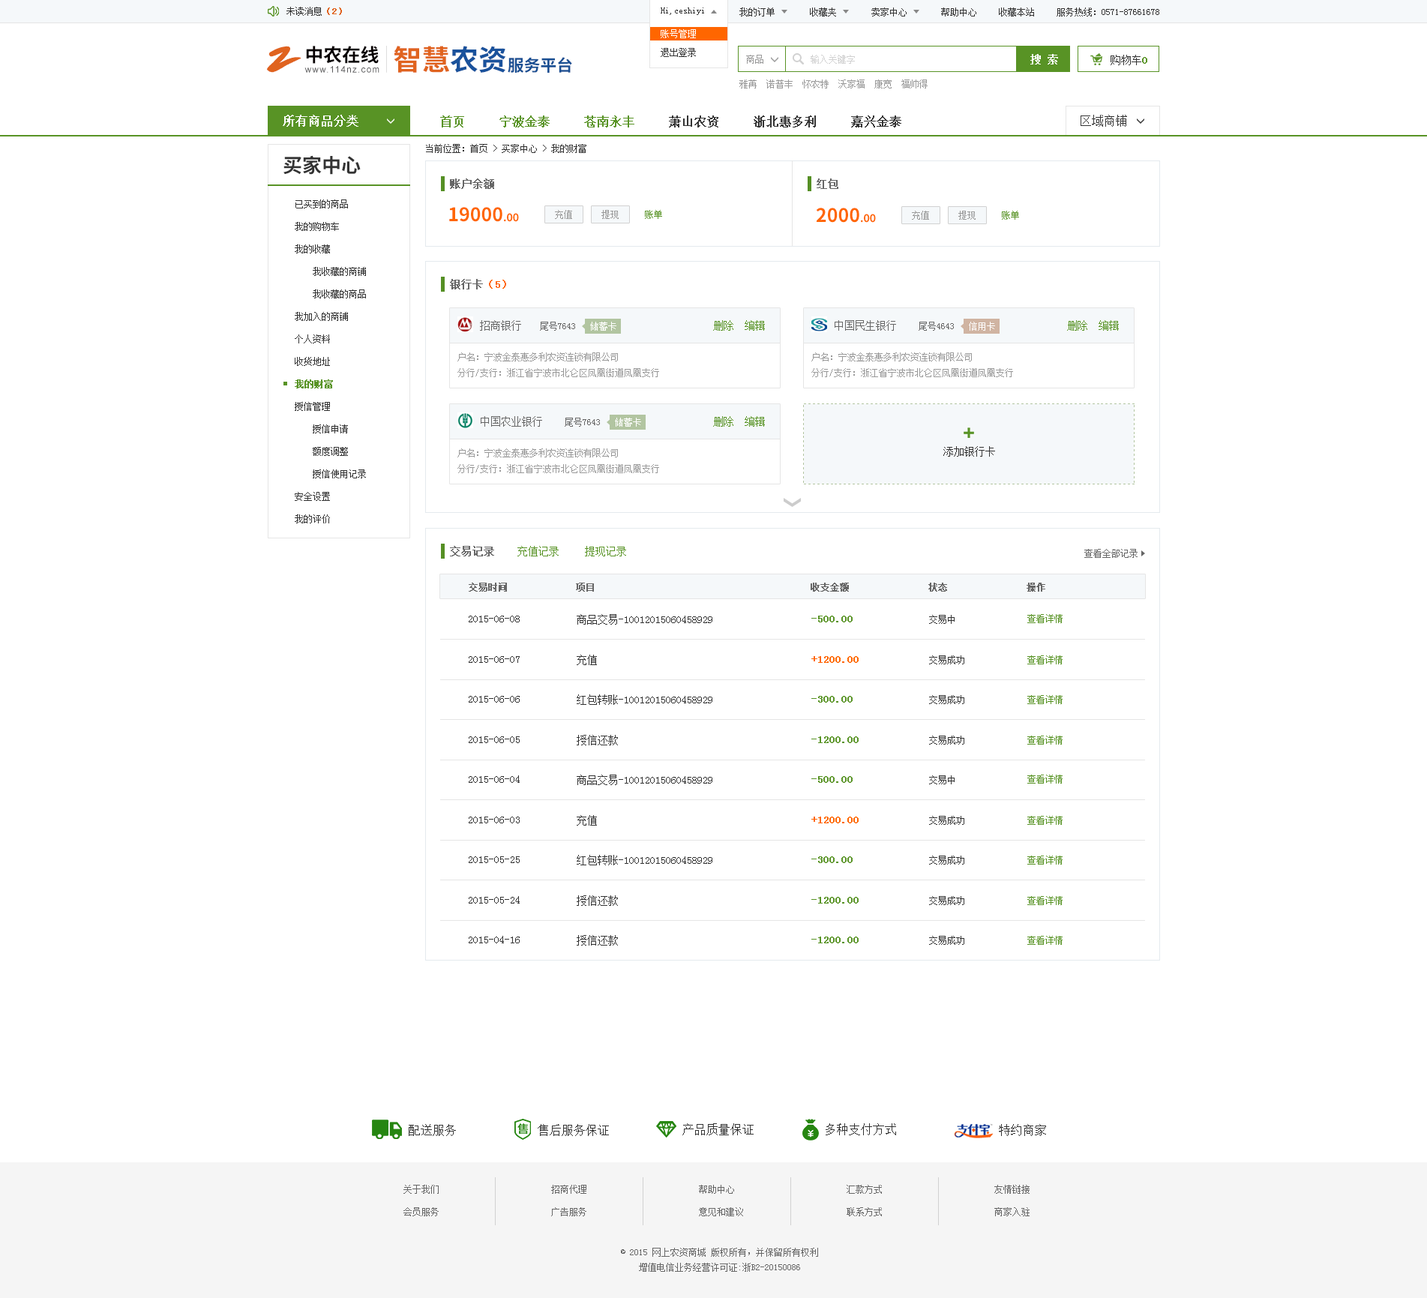
<style>
.page{position:relative;width:1427px;height:1298px;background:#ffffff}
.page>*{position:absolute;margin:0}
.t1{font:9px "SimSun";color:#333333}
.t2{font:9px "SimSun";color:#e0631f;font-weight:bold}
.t3{font:9px/18.8px "SimSun";color:#ffffff}
.t4{font:9px/18.8px "SimSun";color:#333333}
.t5{font:38px "SmudgerLetPlain";color:#e0631f}
.t6{font:18.6px "SourceHanSansCN-Bold";color:#060001}
.t7{font:28.4px "SourceHanSansCN-Bold";color:#e0631f}
.t8{font:28.4px "SourceHanSansCN-Bold";color:#1a529c}
.t9{font:10.5px "SimSun";color:#ffffff;font-weight:bold}
.t10{font:16.3px "SourceHanSansCN-Bold";color:#194f93}
.t11{font:9px "SimSun";color:#999999}
.t12{font:9px "SimSun";color:#d1d1d1}
.t13{font:10.5px "SimSun";color:#333333}
.t14{font:10.5px "SimSun";color:#589325;font-weight:bold}
.t15{font:8.9px "ArialMT";letter-spacing:0.1em;color:#585859}
.t16{font:12px "SimSun";color:#ffffff;font-weight:bold}
.t17{font:12px "SimSun";color:#333333;font-weight:bold}
.t18{font:12px "SimSun";color:#589325;font-weight:bold}
.t19{font:12px "SimSun";color:#333333}
.t20{font:19.5px "SourceHanSansCN-Bold";color:#333333}
.t21{font:10.5px "SimSun";color:#666666;font-weight:bold}
.t22{font:9px/22.5px "SimSun";color:#333333}
.t23{font:9px/22.5px "SimSun";color:#589325;font-weight:bold}
.t24{font:18.8px "SourceHanSansCN-Bold";color:#ff6600}
.t25{font:10.5px "SourceHanSansCN-Bold";color:#ff6600}
.t26{font:9px "SimSun";color:#589325}
.t27{font:10.5px "SimSun";color:#ff6600;font-weight:bold}
.t28{font:10.5px "SimSun";color:#666666}
.t29{font:9px "SimSun";color:#666666}
.t30{font:9px "SimSun";color:#ffffff}
.t31{font:10.5px "SimSun";color:#589325}
.t32{font:9px/7px "SourceHanSansCN-Regular";letter-spacing:0.12em;color:#b2c5a1}
.t33{font:9px "SourceHanSansCN-Regular";letter-spacing:0.12em;color:#b2c5a1}
.t34{font:9px "SimSun";color:#666666;font-weight:bold}
.t35{font:9px/22.5px "SimSun";color:#666666}
.t36{font:9px/15px "SimSun";color:#666666}
</style>
<div class="page">
<p class="t1" style="left:286px;top:7px;width:56px;height:9px">未读消息<span class="t2">（2）</span></p>
<p class="t1" style="left:661px;top:8px;width:43px;height:7px">Hi,ceshiyi</p>
<p class="t1" style="left:661px;top:8px;width:43px;height:7px">Hi,ceshiyi</p>
<p class="t1" style="left:740px;top:8px;width:35px;height:8px">我的订单</p>
<p class="t1" style="left:810px;top:8px;width:26px;height:8px">收藏夹</p>
<p class="t1" style="left:872px;top:8px;width:35px;height:8px">卖家中心</p>
<p class="t1" style="left:941px;top:8px;width:35px;height:8px">帮助中心</p>
<p class="t1" style="left:999px;top:8px;width:35px;height:8px">收藏本站</p>
<p class="t1" style="left:1057px;top:8px;width:103px;height:8px">服务热线：0571-87661678</p>
<p class="t3" style="left:661px;top:29px;width:35px;height:28px">账号管理<br><span class="t4">退出登录</span></p>
<p class="t5" style="left:267px;top:46px;width:35px;height:27px">Z</p>
<p class="t6" style="left:306px;top:46px;width:73px;height:18px">中农在线</p>
<p class="t7" style="left:394px;top:46px;width:112px;height:27px">智慧<span class="t8">农资</span></p>
<p class="t9" style="left:1030px;top:54px;width:28px;height:10px">搜 索</p>
<p class="t10" style="left:508px;top:57px;width:64px;height:16px">服务平台</p>
<p class="t11" style="left:746px;top:55px;width:18px;height:9px">商品</p>
<p class="t12" style="left:811px;top:55px;width:44px;height:9px">输入关键字</p>
<p class="t13" style="left:1111px;top:55px;width:37px;height:10px">购物车<span class="t14">0</span></p>
<p class="t15" style="left:304px;top:66px;width:76px;height:7px">www.114nz.com</p>
<p class="t11" style="left:740px;top:80px;width:188px;height:8px">雅苒  诺普丰  怀农特  沃家福  康宽  福帅得</p>
<p class="t16" style="left:283px;top:115px;width:75px;height:12px">所有商品分类</p>
<p class="t17" style="left:440px;top:116px;width:462px;height:12px"><span class="t18">首页     宁波金泰     苍南永丰    </span> 萧山农资     浙北惠多利     嘉兴金泰</p>
<p class="t19" style="left:1081px;top:115px;width:46px;height:12px">区域商铺</p>
<p class="t1" style="left:426px;top:144px;width:160px;height:9px">当前位置：首页 &gt; 买家中心 &gt; 我的财富</p>
<p class="t20" style="left:284px;top:155px;width:77px;height:20px">买家中心</p>
<p class="t21" style="left:450px;top:178px;width:44px;height:11px">账户余额</p>
<p class="t21" style="left:817px;top:178px;width:21px;height:11px">红包</p>
<p class="t22" style="left:295px;top:200px;width:71px;height:324px">已买到的商品<br>我的购物车<br>我的收藏<br>    我收藏的商铺<br>    我收藏的商品<br>我加入的商铺<br>个人资料<br>收货地址<br><span class="t23">我的财富<br></span>授信管理<br>    授信申请<br>    额度调整<br>    授信使用记录<br>安全设置<br>我的评价</p>
<p class="t24" style="left:449px;top:207px;width:70px;height:15px">19000<span class="t25">.00</span></p>
<p class="t24" style="left:816px;top:208px;width:60px;height:15px">2000<span class="t25">.00</span></p>
<p class="t11" style="left:555px;top:210px;width:17px;height:9px">充值</p>
<p class="t11" style="left:602px;top:210px;width:17px;height:9px">提现</p>
<p class="t26" style="left:645px;top:210px;width:17px;height:9px">账单</p>
<p class="t11" style="left:912px;top:211px;width:17px;height:9px">充值</p>
<p class="t11" style="left:958px;top:211px;width:18px;height:9px">提现</p>
<p class="t26" style="left:1002px;top:211px;width:17px;height:9px">账单</p>
<p class="t21" style="left:450px;top:279px;width:56px;height:11px">银行卡<span class="t27">（5）</span></p>
<p class="t28" style="left:480px;top:320px;width:41px;height:11px">招商银行</p>
<p class="t29" style="left:540px;top:322px;width:35px;height:9px">尾号7643</p>
<p class="t30" style="left:590px;top:322px;width:26px;height:9px">储蓄卡</p>
<p class="t31" style="left:713px;top:320px;width:52px;height:11px">删除  编辑</p>
<p class="t28" style="left:835px;top:320px;width:61px;height:11px">中国民生银行</p>
<p class="t29" style="left:919px;top:322px;width:35px;height:9px">尾号4643</p>
<p class="t30" style="left:969px;top:322px;width:26px;height:9px">信用卡</p>
<p class="t31" style="left:1067px;top:320px;width:52px;height:11px">删除  编辑</p>
<p class="t11" style="left:458px;top:352px;width:160px;height:10px">户名：宁波金泰惠多利农资连锁有限公司</p>
<p class="t11" style="left:812px;top:352px;width:160px;height:10px">户名：宁波金泰惠多利农资连锁有限公司</p>
<p class="t11" style="left:458px;top:368px;width:201px;height:9px">分行/支行：浙江省宁波市北仑区凤凰街道凤凰支行</p>
<p class="t11" style="left:812px;top:368px;width:201px;height:9px">分行/支行：浙江省宁波市北仑区凤凰街道凤凰支行</p>
<p class="t32" style="left:803px;top:405px;width:1px;height:78px">------------------</p>
<p class="t33" style="left:804px;top:404px;width:331px;height:0px">---------------------------------------------------------------------------</p>
<p class="t32" style="left:1134px;top:405px;width:1px;height:78px">------------------</p>
<p class="t28" style="left:481px;top:416px;width:61px;height:11px">中国农业银行</p>
<p class="t29" style="left:565px;top:418px;width:35px;height:9px">尾号7643</p>
<p class="t30" style="left:615px;top:418px;width:26px;height:9px">储蓄卡</p>
<p class="t31" style="left:713px;top:416px;width:52px;height:11px">删除  编辑</p>
<p class="t11" style="left:458px;top:448px;width:160px;height:10px">户名：宁波金泰惠多利农资连锁有限公司</p>
<p class="t13" style="left:944px;top:446px;width:51px;height:11px">添加银行卡</p>
<p class="t11" style="left:458px;top:464px;width:201px;height:9px">分行/支行：浙江省宁波市北仑区凤凰街道凤凰支行</p>
<p class="t33" style="left:804px;top:484px;width:331px;height:0px">---------------------------------------------------------------------------</p>
<p class="t21" style="left:450px;top:546px;width:44px;height:10px">交易记录</p>
<p class="t31" style="left:518px;top:546px;width:41px;height:10px">充值记录</p>
<p class="t31" style="left:585px;top:546px;width:41px;height:10px">提现记录</p>
<p class="t29" style="left:1084px;top:549px;width:54px;height:9px">查看全部记录</p>
<p class="t34" style="left:469px;top:583px;width:577px;height:9px">交易时间             项目                                         收支金额               状态               操作</p>
<p class="t13" style="left:469px;top:616px;width:51px;height:6px">2015-06-08</p>
<p class="t13" style="left:577px;top:614px;width:135px;height:11px">商品交易-10012015060458929</p>
<p class="t14" style="left:812px;top:616px;width:41px;height:6px">-500.00</p>
<p class="t1" style="left:929px;top:615px;width:26px;height:9px">交易中</p>
<p class="t26" style="left:1028px;top:614px;width:35px;height:9px">查看详情</p>
<p class="t13" style="left:469px;top:656px;width:51px;height:7px">2015-06-07</p>
<p class="t13" style="left:577px;top:655px;width:20px;height:10px">充值</p>
<p class="t27" style="left:812px;top:656px;width:47px;height:7px">+1200.00</p>
<p class="t1" style="left:929px;top:656px;width:35px;height:8px">交易成功</p>
<p class="t26" style="left:1028px;top:656px;width:35px;height:8px">查看详情</p>
<p class="t13" style="left:469px;top:696px;width:51px;height:7px">2015-06-06</p>
<p class="t13" style="left:577px;top:694px;width:135px;height:11px">红包转账-10012015060458929</p>
<p class="t14" style="left:812px;top:696px;width:41px;height:7px">-300.00</p>
<p class="t1" style="left:929px;top:695px;width:35px;height:9px">交易成功</p>
<p class="t26" style="left:1028px;top:695px;width:35px;height:9px">查看详情</p>
<p class="t13" style="left:469px;top:736px;width:51px;height:7px">2015-06-05</p>
<p class="t13" style="left:577px;top:735px;width:41px;height:11px">授信还款</p>
<p class="t14" style="left:812px;top:736px;width:47px;height:7px">-1200.00</p>
<p class="t1" style="left:929px;top:736px;width:35px;height:9px">交易成功</p>
<p class="t26" style="left:1028px;top:736px;width:35px;height:9px">查看详情</p>
<p class="t13" style="left:469px;top:776px;width:51px;height:7px">2015-06-04</p>
<p class="t13" style="left:577px;top:775px;width:135px;height:10px">商品交易-10012015060458929</p>
<p class="t14" style="left:812px;top:776px;width:41px;height:7px">-500.00</p>
<p class="t1" style="left:929px;top:776px;width:26px;height:8px">交易中</p>
<p class="t26" style="left:1028px;top:775px;width:35px;height:9px">查看详情</p>
<p class="t13" style="left:469px;top:817px;width:51px;height:7px">2015-06-03</p>
<p class="t13" style="left:577px;top:815px;width:20px;height:11px">充值</p>
<p class="t27" style="left:812px;top:817px;width:47px;height:7px">+1200.00</p>
<p class="t1" style="left:929px;top:816px;width:35px;height:9px">交易成功</p>
<p class="t26" style="left:1028px;top:816px;width:35px;height:9px">查看详情</p>
<p class="t13" style="left:469px;top:856px;width:51px;height:7px">2015-05-25</p>
<p class="t13" style="left:577px;top:855px;width:135px;height:11px">红包转账-10012015060458929</p>
<p class="t14" style="left:812px;top:856px;width:41px;height:7px">-300.00</p>
<p class="t1" style="left:929px;top:856px;width:35px;height:9px">交易成功</p>
<p class="t26" style="left:1028px;top:856px;width:35px;height:9px">查看详情</p>
<p class="t13" style="left:469px;top:896px;width:51px;height:8px">2015-05-24</p>
<p class="t13" style="left:577px;top:896px;width:41px;height:10px">授信还款</p>
<p class="t14" style="left:812px;top:897px;width:47px;height:7px">-1200.00</p>
<p class="t1" style="left:929px;top:896px;width:35px;height:9px">交易成功</p>
<p class="t26" style="left:1028px;top:896px;width:35px;height:9px">查看详情</p>
<p class="t13" style="left:469px;top:936px;width:51px;height:8px">2015-04-16</p>
<p class="t13" style="left:577px;top:935px;width:41px;height:11px">授信还款</p>
<p class="t14" style="left:812px;top:937px;width:47px;height:7px">-1200.00</p>
<p class="t1" style="left:929px;top:936px;width:35px;height:9px">交易成功</p>
<p class="t26" style="left:1028px;top:936px;width:35px;height:9px">查看详情</p>
<p class="t19" style="left:409px;top:1124px;width:47px;height:12px">配送服务</p>
<p class="t19" style="left:538px;top:1124px;width:71px;height:12px">售后服务保证</p>
<p class="t19" style="left:682px;top:1124px;width:72px;height:12px">产品质量保证</p>
<p class="t19" style="left:826px;top:1124px;width:70px;height:12px">多种支付方式</p>
<p class="t19" style="left:999px;top:1124px;width:47px;height:12px">特约商家</p>
<p class="t35" style="left:404px;top:1185px;width:35px;height:31px">关于我们<br>会员服务</p>
<p class="t35" style="left:551px;top:1185px;width:35px;height:31px">招商代理<br>广告服务</p>
<p class="t35" style="left:699px;top:1185px;width:44px;height:31px">帮助中心<br>意见和建议</p>
<p class="t35" style="left:847px;top:1185px;width:35px;height:31px">汇款方式<br>联系方式</p>
<p class="t35" style="left:994px;top:1185px;width:36px;height:31px">友情链接<br>商家入驻</p>
<p class="t36" style="left:621px;top:1248px;width:197px;height:24px;text-align:center">© 2015 网上农资商城 版权所有，并保留所有权利<br>增值电信业务经营许可证:浙B2-20150086</p>
</div>
